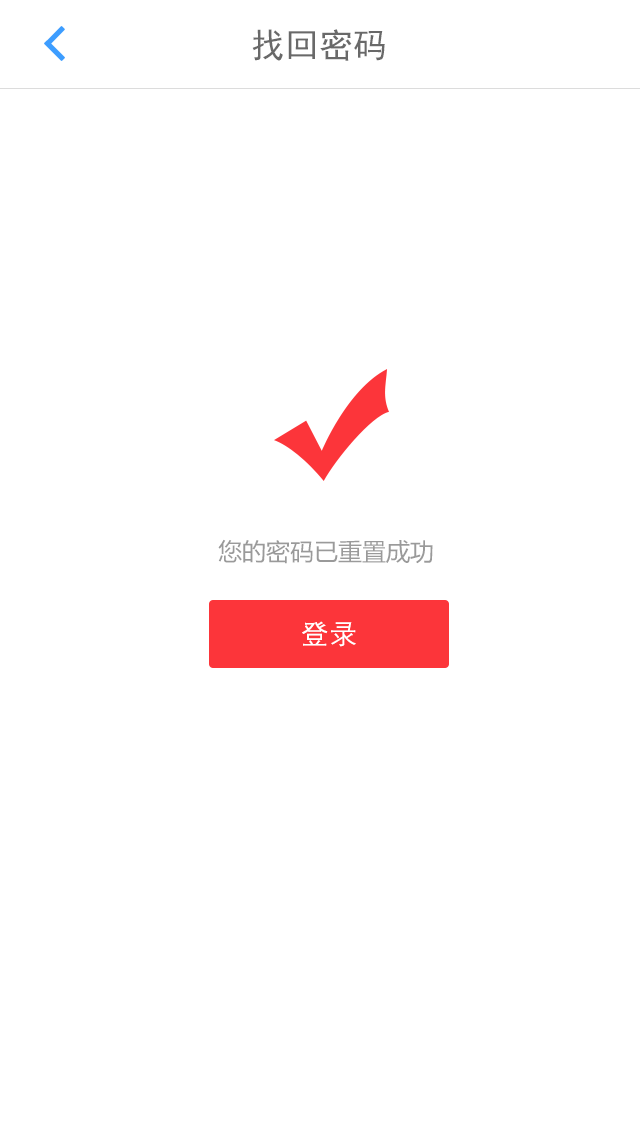
<style>
.page{position:relative;width:640px;height:1136px;background:#ffffff}
.page>*{position:absolute;margin:0}
.t1{font:34px "SimHei";color:#696969}
.t2{font:24px "MicrosoftYaHei";color:#9a9a9a}
.t3{font:28px "FZXH1JW--GB1-0";color:#ffffff;font-weight:bold}
</style>
<div class="page">
<p class="t1" style="left:252px;top:29px;width:133px;height:32px">找回密码</p>
<p class="t2" style="left:218px;top:539px;width:215px;height:25px">您的密码已重置成功</p>
<p class="t3" style="left:302px;top:621px;width:54px;height:26px">登录</p>
</div>
